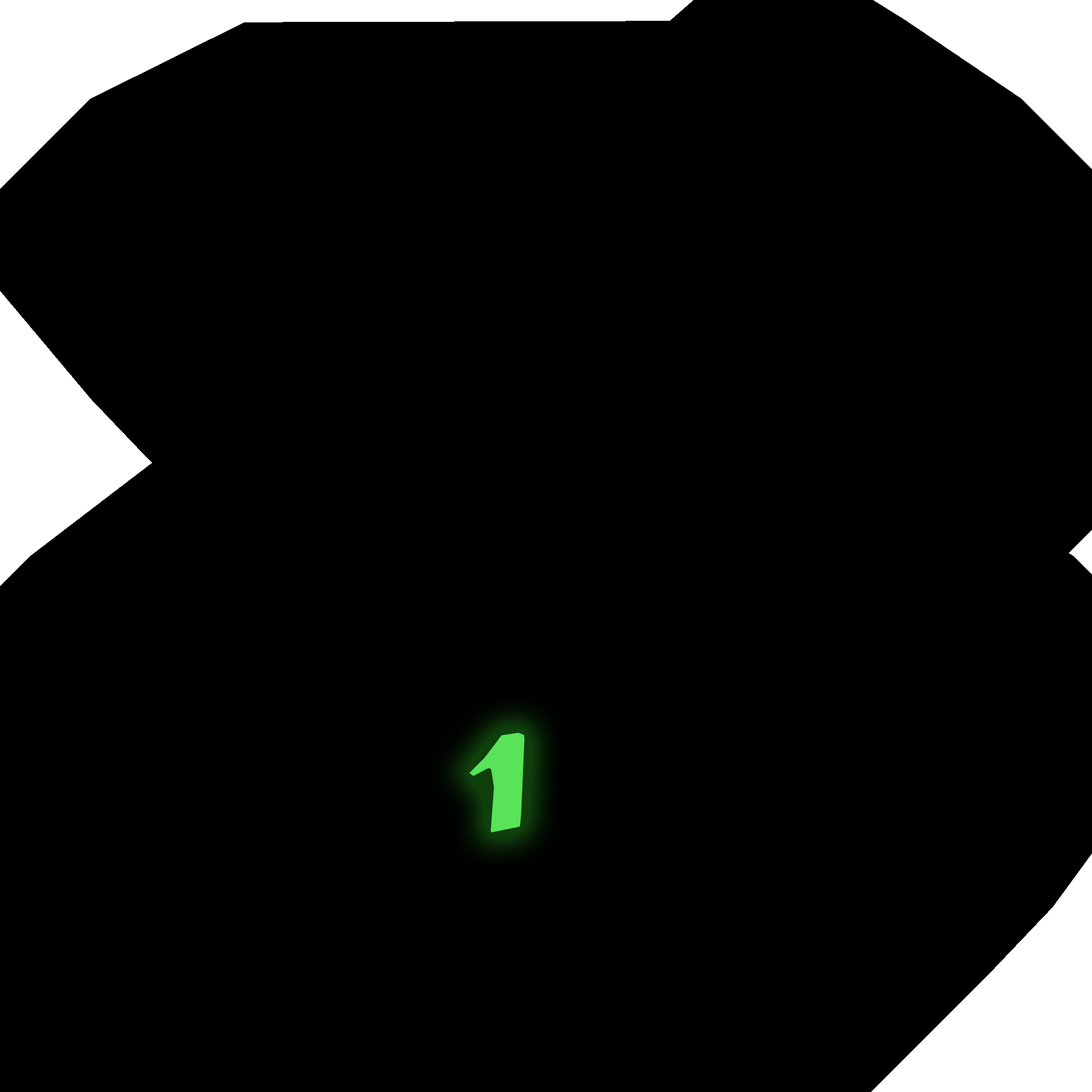
<style>
.page{position:relative;width:1092px;height:1092px;background:#000000}
.page>*{position:absolute;margin:0}
.t1{font:160px "Tarzan";color:#59e359}
</style>
<div class="page">
<p class="t1" style="left:469px;top:733px;width:56px;height:99px">1</p>
</div>
